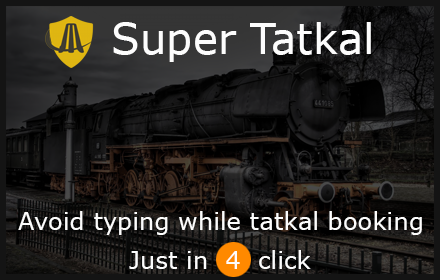
<style>
.page{position:relative;width:440px;height:280px}
.page>*{position:absolute;margin:0}
.t1{font:42px "Verdana";color:#fefefe}
.t2{font:24.3px "Verdana";color:#fefefe}
</style>
<div class="page">
<p class="t1" style="left:113px;top:22px;width:258px;height:40px">Super Tatkal</p>
<p class="t2" style="left:18px;top:211px;width:404px;height:24px">Avoid typing while tatkal booking</p>
<p class="t2" style="left:129px;top:250px;width:182px;height:19px">Just in  4  click</p>
</div>
